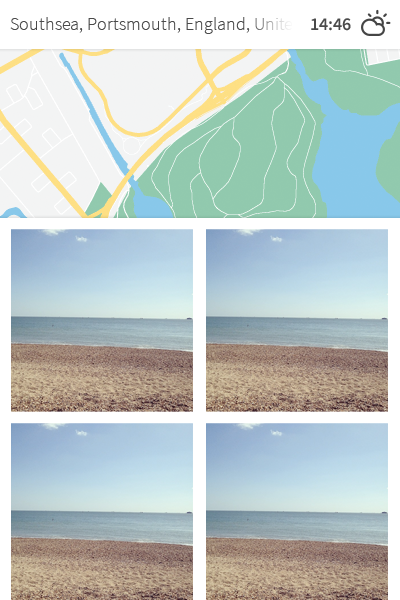
<style>
.page{position:relative;width:400px;height:600px}
.page>*{position:absolute;margin:0}
.t1{font:18px "SourceSansPro-Light";color:#4a4a4a}
.t2{font:18px "SourceSansPro-Semibold";color:#4a4a4a}
</style>
<div class="page">
<p class="t1" style="left:10px;top:17px;width:364px;height:17px">Southsea, Portsmouth, England, United Kingdom</p>
<p class="t2" style="left:311px;top:18px;width:40px;height:13px">14:46</p>
</div>
